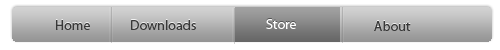
<style>
.page{position:relative;width:500px;height:50px;background:#ffffff}
.page>*{position:absolute;margin:0}
.t1{font:14px "MyriadPro-Regular";color:#383838}
.t2{font:14px "MyriadPro-Regular";color:#ffffff}
</style>
<div class="page">
<p class="t1" style="left:56px;top:20px;width:34px;height:10px">Home</p>
<p class="t1" style="left:131px;top:20px;width:65px;height:10px">Downloads</p>
<p class="t2" style="left:266px;top:19px;width:30px;height:10px">Store</p>
<p class="t1" style="left:374px;top:21px;width:37px;height:10px">About</p>
</div>
